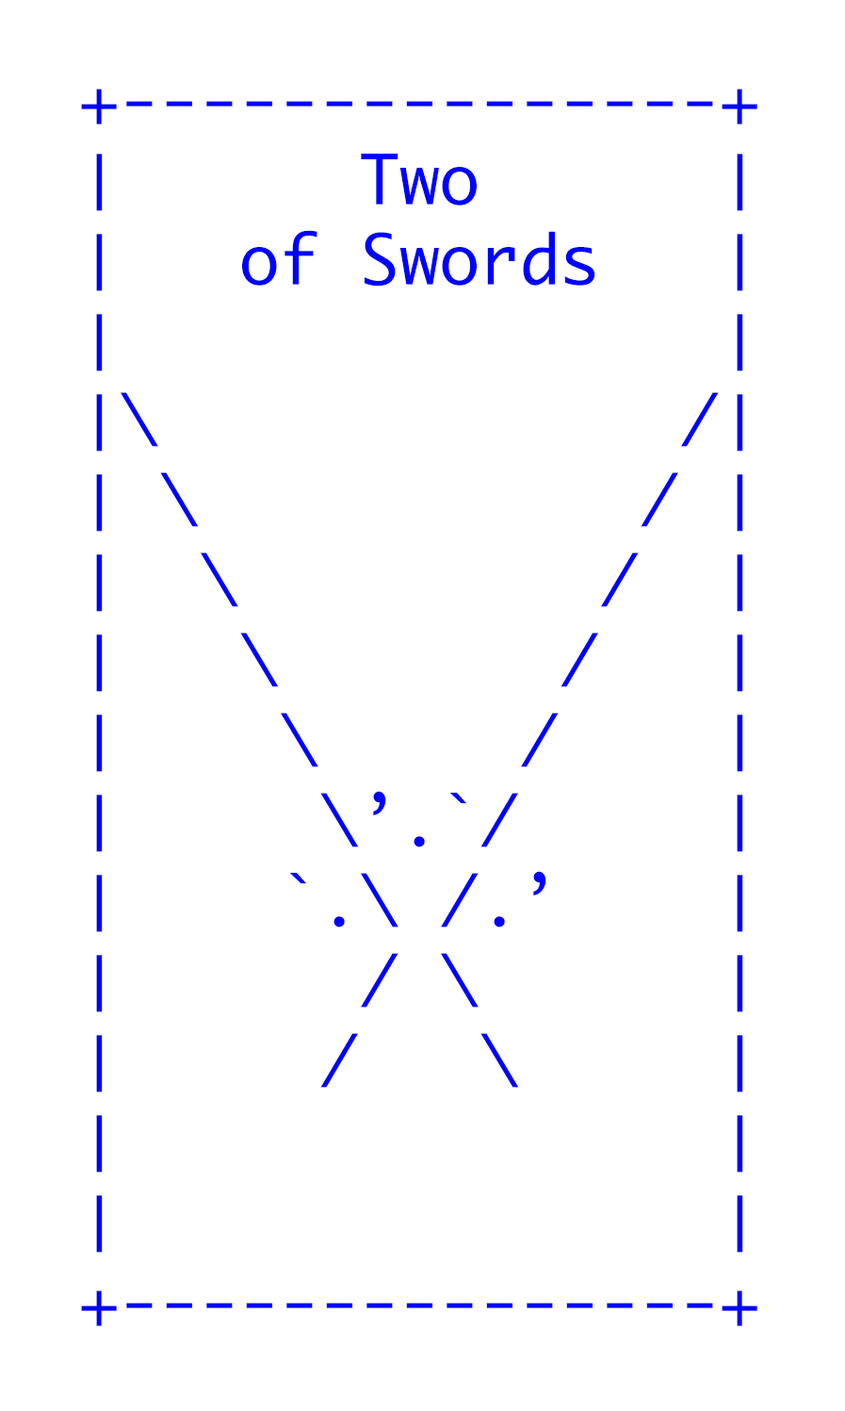
<style>
.page{position:relative;width:845px;height:1411px;background:#ffffff}
.page>*{position:absolute;margin:0}
.t1{font:66.7px "Monaco";color:#0000ff}
</style>
<div class="page">
<p class="t1" style="left:81px;top:89px;width:677px;height:1237px">+---------------+<br>│      Two      │<br>│   of Swords   │<br>│               │<br>│\             /│<br>│ \           / │<br>│  \         /  │<br>│   \       /   │ <br>│    \     /    │ <br>│     \’.`/     │<br>│    `.\ /.’    │ <br>│      / \      │ <br>│     /   \     │<br>│               │<br>│               │<br>+---------------+</p>
</div>
